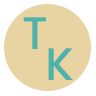
<style>
.page{position:relative;width:96px;height:96px;background:#e8d3a3}
.page>*{position:absolute;margin:0}
.t1{font:45.8px "Poppins-Medium";color:#4fb2aa}
</style>
<div class="page">
<p class="t1" style="left:23px;top:17px;width:23px;height:32px">T</p>
<p class="t1" style="left:48px;top:48px;width:25px;height:32px">K</p>
</div>
